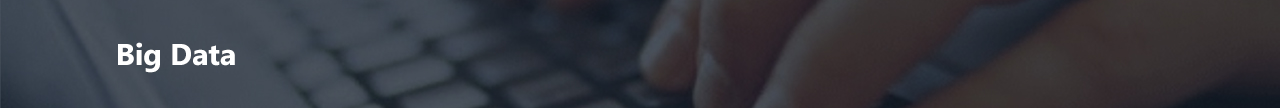
<style>
.page{position:relative;width:1280px;height:108px}
.page>*{position:absolute;margin:0}
.t1{font:30px "Ebrima-Bold";color:#ffffff}
</style>
<div class="page">
<p class="t1" style="left:118px;top:42px;width:117px;height:31px">Big Data</p>
</div>
